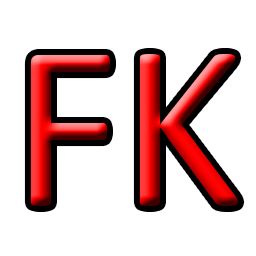
<style>
.page{position:relative;width:256px;height:256px;background:#ffffff}
.page>*{position:absolute;margin:0}
.t1{font:237.5px "Calibri"}
</style>
<div class="page">
<p class="t1" style="left:30px;top:54px;width:209px;height:152px">FK</p>
</div>
